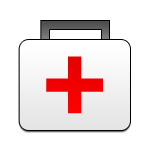
<style>
.page{position:relative;width:150px;height:150px;background:#ffffff}
.page>*{position:absolute;margin:0}
.t1{font:121.6px "DroidSans-Bold";color:#ff0000}
</style>
<div class="page">
<p class="t1" style="left:46px;top:56px;width:57px;height:58px">+</p>
</div>
